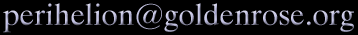
<style>
.page{position:relative;width:358px;height:35px;background:#000000}
.page>*{position:absolute;margin:0}
.t1{font:30px "Dutch801BT-Roman"}
</style>
<div class="page">
<p class="t1" style="left:3px;top:3px;width:351px;height:30px">perihelion@goldenrose.org</p>
</div>
